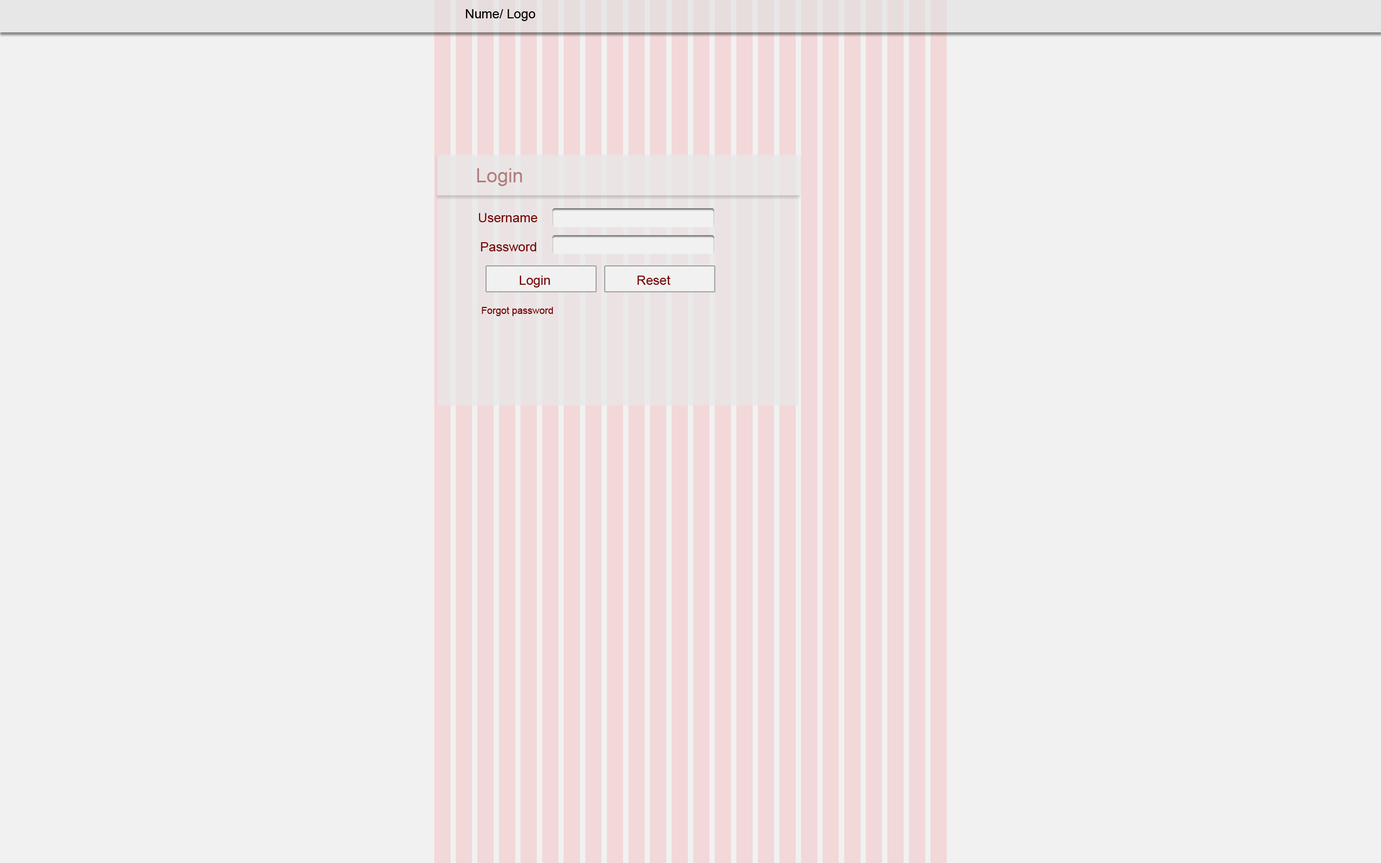
<style>
.page{position:relative;width:1381px;height:863px;background:#f1f1f1}
.page>*{position:absolute;margin:0}
.t1{font:12.9px "ArialMT";color:#000000}
.t2{font:12.9px "ArialMT";color:#750707}
.t3{font:9.7px "ArialMT";color:#750707}
</style>
<div class="page">
<p class="t1" style="left:466px;top:9px;width:70px;height:12px">Nume/ Logo</p>
<p class="t2" style="left:479px;top:213px;width:58px;height:9px">Username</p>
<p class="t2" style="left:481px;top:242px;width:55px;height:9px">Password</p>
<p class="t2" style="left:520px;top:276px;width:30px;height:12px">Login</p>
<p class="t2" style="left:637px;top:275px;width:34px;height:10px">Reset</p>
<p class="t3" style="left:482px;top:307px;width:71px;height:9px">Forgot password</p>
</div>
